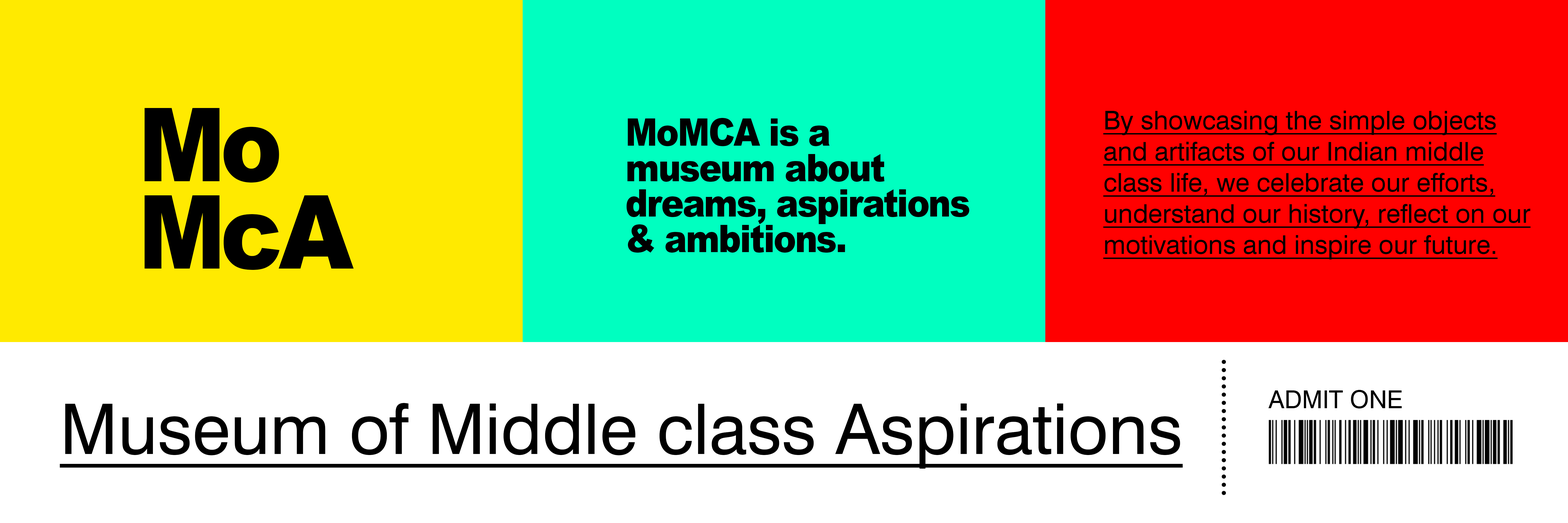
<style>
.page{position:relative;width:1568px;height:523px;background:#ffffff}
.page>*{position:absolute;margin:0}
.t1{font:25.9px "Swiss721BT-Roman";color:#000000;text-decoration:underline}
.t2{font:24.8px "Swiss721BT-Roman";color:#000000}
.t3{font:69.8px "Swiss721BT-Roman";color:#000000;text-decoration:underline}
</style>
<div class="page">
<p class="t1" style="left:1103px;top:111px;width:428px;height:148px">By showcasing the simple objects and artifacts of our Indian middle class life, we celebrate our efforts, understand our history, reflect on our motivations and inspire our future.</p>
<p class="t2" style="left:1268px;top:390px;width:134px;height:18px">ADMIT ONE</p>
<p class="t3" style="left:60px;top:403px;width:1123px;height:65px">Museum of Middle class Aspirations</p>
</div>
